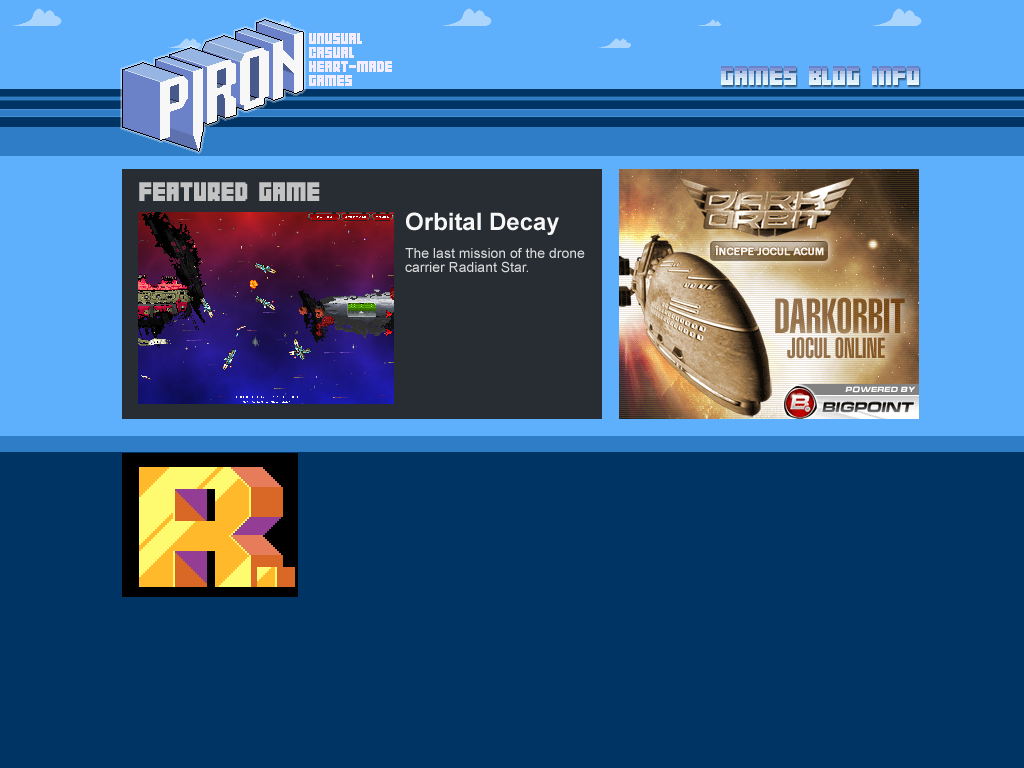
<style>
.page{position:relative;width:1024px;height:768px;background:#003465}
.page>*{position:absolute;margin:0}
.t1{font:14px/14px "04b19";color:#f4ecff}
.t2{font:24px "04b19";color:#c3c3c3}
.t3{font:14px/14px "ArialMT";color:#dadada}
.t4{font:24px/14px "Arial-BoldMT";color:#f8f7f8}
</style>
<div class="page">
<p class="t1" style="left:309px;top:33px;width:83px;height:53px">UNUSUAL <br>CASUAL <br>HEART-MADE <br>GAMES</p>
<p class="t2" style="left:139px;top:182px;width:181px;height:19px">FEATURED GAME</p>
<p class="t3" style="left:405px;top:212px;width:180px;height:61px"><span class="t4">Orbital Decay<br><br></span>The last mission of the drone <br>carrier Radiant Star.</p>
</div>
